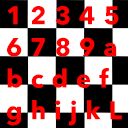
<style>
.page{position:relative;width:128px;height:128px;background:#000000}
.page>*{position:absolute;margin:0}
.t1{font:25.3px/31.6px "AvenirNext-Bold";letter-spacing:0.034em;color:#ff0000}
</style>
<div class="page">
<p class="t1" style="left:7px;top:6px;width:115px;height:120px">1 2 3 4 5<br>6 7 8 9 a<br>b c d e f<br>g h i j k L</p>
</div>
